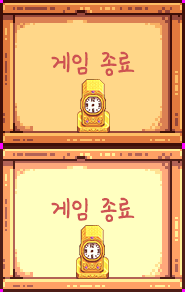
<style>
.page{position:relative;width:185px;height:292px;background:#ffd789}
.page>*{position:absolute;margin:0}
.t1{font:36px "SDMiSaeng";color:#ce5252}
</style>
<div class="page">
<p class="t1" style="left:51px;top:51px;width:84px;height:25px">게임 종료</p>
<p class="t1" style="left:51px;top:197px;width:84px;height:25px">게임 종료</p>
</div>
